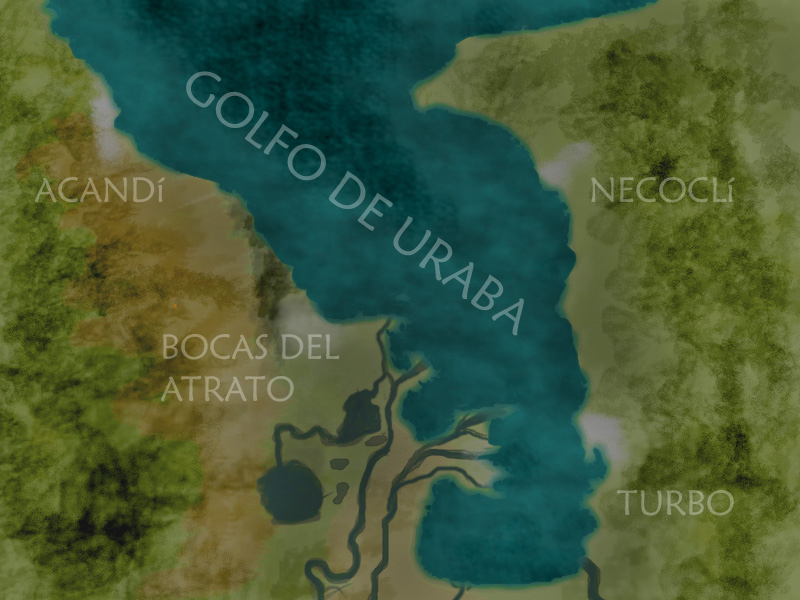
<style>
.page{position:relative;width:800px;height:600px}
.page>*{position:absolute;margin:0}
.t1{font:49.3px "MaiandraGD-Regular";color:#577f7f}
.t2{font:35px "MaiandraGD-Regular";color:#9b936a}
.t3{font:35px "MaiandraGD-Regular";color:#868e62}
.t4{font:35px "MaiandraGD-Regular";color:#9d997a}
.t5{font:35px "MaiandraGD-Regular";color:#8f976f}
</style>
<div class="page">
<p class="t1" style="left:186px;top:71px;width:338px;height:265px;rotate:36deg">GOLFO DE URABA</p>
<p class="t2" style="left:35px;top:177px;width:130px;height:26px">ACANDí</p>
<p class="t3" style="left:590px;top:177px;width:145px;height:26px">NECOCLí</p>
<p class="t4" style="left:161px;top:334px;width:179px;height:68px">BOCAS DEL<br>ATRATO</p>
<p class="t5" style="left:617px;top:489px;width:117px;height:27px">TURBO</p>
</div>
